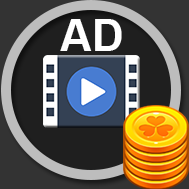
<style>
.page{position:relative;width:189px;height:189px;background:#1f1f1f}
.page>*{position:absolute;margin:0}
.t1{font:44px "Arial-BoldMT";color:#ffffff}
</style>
<div class="page">
<p class="t1" style="left:60px;top:19px;width:62px;height:32px">AD</p>
</div>
